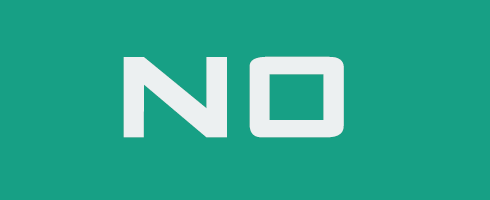
<style>
.page{position:relative;width:490px;height:200px;background:#17a085}
.page>*{position:absolute;margin:0}
.t1{font:100px "GAMECUBENDualSet";color:#ecf0f1}
</style>
<div class="page">
<p class="t1" style="left:123px;top:56px;width:221px;height:82px">NO</p>
</div>
